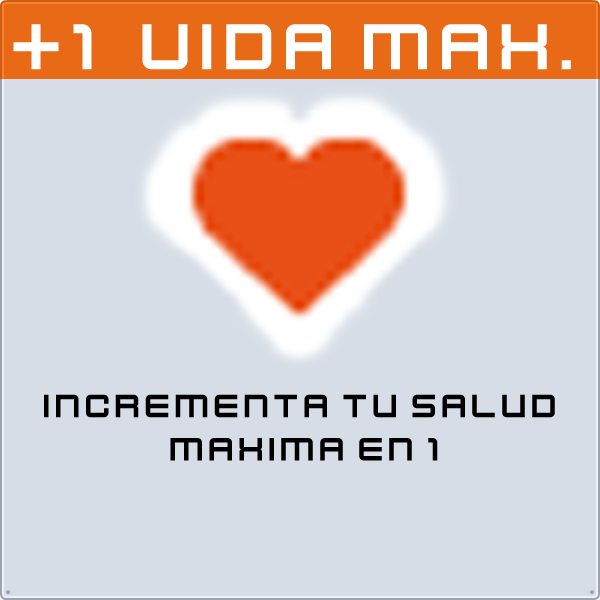
<style>
.page{position:relative;width:600px;height:600px;background:#d6dde7}
.page>*{position:absolute;margin:0}
.t1{font:72px "KenVector-Future";color:#ffffff}
.t2{font:36px "KenVector-Future";color:#000000}
</style>
<div class="page">
<p class="t1" style="left:13px;top:24px;width:558px;height:46px">+1  vida max.</p>
<p class="t2" style="left:44px;top:394px;width:511px;height:67px;text-align:center">incrementa tu salud <br>maxima en 1</p>
</div>
